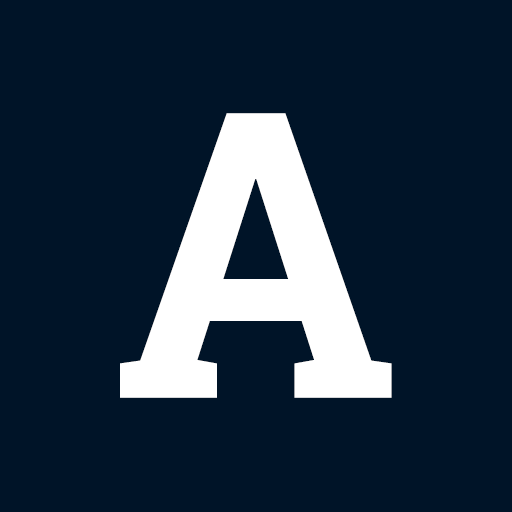
<style>
.page{position:relative;width:512px;height:512px;background:#001428}
.page>*{position:absolute;margin:0}
.t1{font:400px "RobotoSlab-Bold";letter-spacing:0.02em;color:#ffffff;text-transform:uppercase}
</style>
<div class="page">
<p class="t1" style="left:120px;top:113px;width:272px;height:285px">A</p>
</div>
